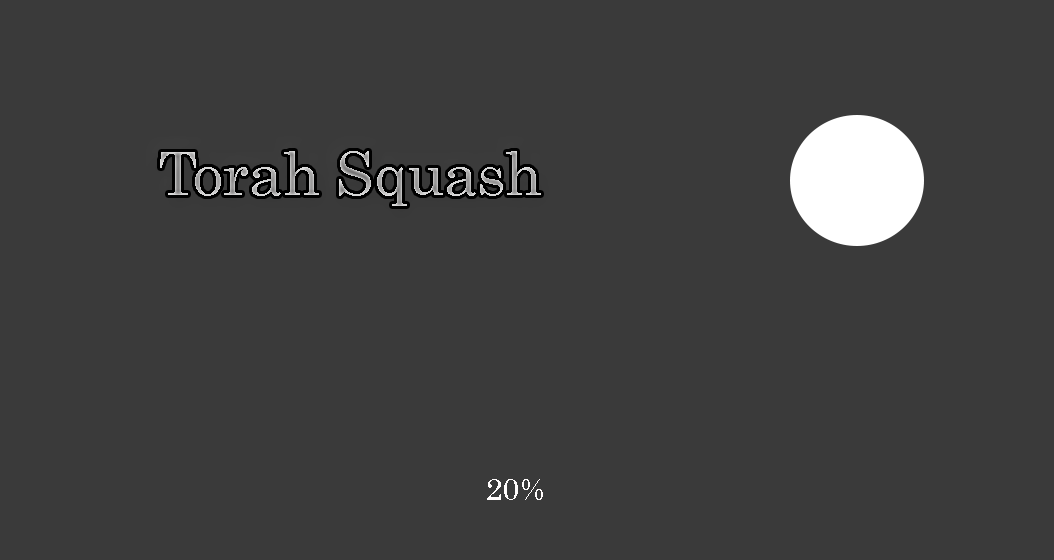
<style>
.page{position:relative;width:1054px;height:560px;background:#3a3a3a}
.page>*{position:absolute;margin:0}
.t1{font:60px "Century"}
.t2{font:30px "Century";color:#fffcfc}
</style>
<div class="page">
<p class="t1" style="left:160px;top:151px;width:381px;height:55px">Torah Squash</p>
<p class="t2" style="left:487px;top:479px;width:56px;height:21px">20%</p>
</div>
